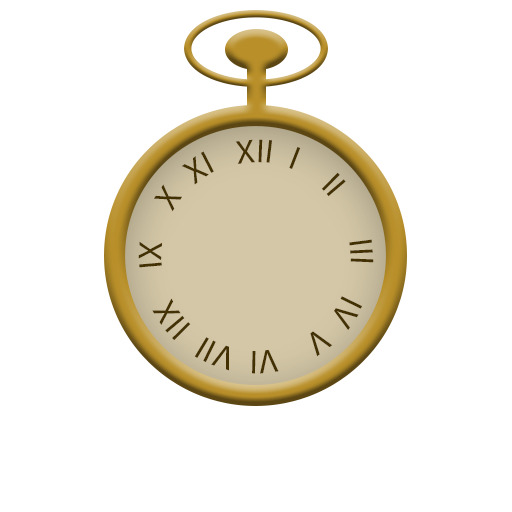
<style>
.page{position:relative;width:512px;height:512px;background:#ffffff}
.page>*{position:absolute;margin:0}
.t1{font:33.3px "MyriadPro-Regular";color:#433104}
</style>
<div class="page">
<p class="t1" style="left:138px;top:139px;width:236px;height:235px;text-align:justify">XII I  II   III  IV V  VI VII IIX  IX  X XI</p>
</div>
